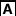
<style>
.page{position:relative;width:16px;height:16px;background:#ffffff}
.page>*{position:absolute;margin:0}
.t1{font:14px "Helvetica-Bold";letter-spacing:0.1em;color:#000000}
</style>
<div class="page">
<p class="t1" style="left:2px;top:2px;width:11px;height:11px">A</p>
</div>
